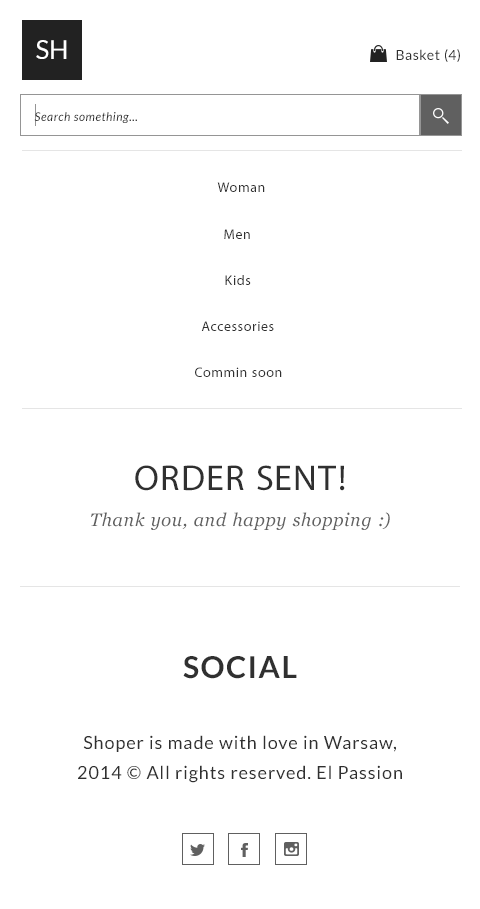
<style>
.page{position:relative;width:480px;height:909px;background:#ffffff}
.page>*{position:absolute;margin:0}
.t1{font:25.9px "Lato-Regular";color:#ffffff;text-transform:uppercase}
.t2{font:14px "Lato-Regular";letter-spacing:0.05em;color:#303030}
.t3{font:12px "Lato-Italic";letter-spacing:0.05em;color:#303030}
.t4{font:14px "MyriadPro-Regular";letter-spacing:0.05em;color:#303030}
.t5{font:18px/36px "Georgia-Italic";letter-spacing:0.05em;color:#606060}
.t6{font:36px/36px "MyriadPro-Regular";letter-spacing:0.05em;color:#303030;text-transform:uppercase}
.t7{font:30px "Lato-Bold";letter-spacing:0.05em;color:#303030;text-transform:uppercase}
.t8{font:18px/30px "Lato-Regular";letter-spacing:0.05em;color:#303030}
</style>
<div class="page">
<p class="t1" style="left:36px;top:40px;width:31px;height:19px">SH</p>
<p class="t2" style="left:396px;top:49px;width:64px;height:13px">Basket (4)</p>
<p class="t3" style="left:34px;top:112px;width:103px;height:11px">Search something...</p>
<p class="t4" style="left:217px;top:182px;width:48px;height:10px">Woman</p>
<p class="t4" style="left:224px;top:229px;width:26px;height:10px">Men</p>
<p class="t4" style="left:225px;top:275px;width:26px;height:10px">Kids</p>
<p class="t4" style="left:201px;top:321px;width:73px;height:10px">Accessories</p>
<p class="t4" style="left:195px;top:367px;width:87px;height:10px">Commin soon</p>
<p class="t5" style="left:91px;top:465px;width:299px;height:65px;text-align:center"><span class="t6">ORDER SENT!<br></span>Thank you, and happy shopping :)</p>
<p class="t7" style="left:183px;top:656px;width:114px;height:23px">social</p>
<p class="t8" style="left:78px;top:735px;width:324px;height:48px;text-align:center">Shoper is made with love in Warsaw,<br>2014 © All rights reserved. El Passion</p>
</div>
